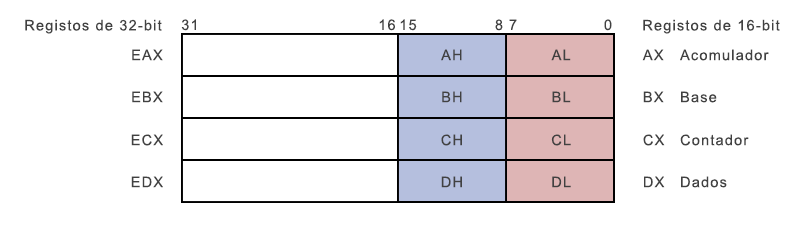
<style>
.page{position:relative;width:801px;height:226px;background:#ffffff}
.page>*{position:absolute;margin:0}
.t1{font:14.6px "ArialMT";letter-spacing:0.08em;color:#414141}
</style>
<div class="page">
<p class="t1" style="left:25px;top:19px;width:137px;height:15px">Registos de 32-bit</p>
<p class="t1" style="left:181px;top:19px;width:15px;height:12px">31</p>
<p class="t1" style="left:379px;top:19px;width:16px;height:12px">16</p>
<p class="t1" style="left:400px;top:19px;width:17px;height:12px">15</p>
<p class="t1" style="left:495px;top:19px;width:8px;height:12px">8</p>
<p class="t1" style="left:509px;top:19px;width:8px;height:11px">7</p>
<p class="t1" style="left:604px;top:19px;width:8px;height:12px">0</p>
<p class="t1" style="left:643px;top:19px;width:137px;height:15px">Registos de 16-bit</p>
<p class="t1" style="left:132px;top:49px;width:31px;height:12px">EAX</p>
<p class="t1" style="left:441px;top:49px;width:21px;height:12px">AH</p>
<p class="t1" style="left:551px;top:49px;width:20px;height:12px">AL</p>
<p class="t1" style="left:642px;top:49px;width:127px;height:12px">AX Acomulador</p>
<p class="t1" style="left:132px;top:91px;width:31px;height:12px">EBX</p>
<p class="t1" style="left:442px;top:91px;width:20px;height:12px">BH</p>
<p class="t1" style="left:552px;top:91px;width:19px;height:12px">BL</p>
<p class="t1" style="left:643px;top:91px;width:74px;height:12px">BX Base</p>
<p class="t1" style="left:131px;top:134px;width:32px;height:12px">ECX</p>
<p class="t1" style="left:441px;top:134px;width:21px;height:12px">CH</p>
<p class="t1" style="left:551px;top:134px;width:20px;height:12px">CL</p>
<p class="t1" style="left:643px;top:134px;width:106px;height:12px">CX Contador</p>
<p class="t1" style="left:131px;top:176px;width:32px;height:12px">EDX</p>
<p class="t1" style="left:441px;top:176px;width:21px;height:12px">DH</p>
<p class="t1" style="left:552px;top:176px;width:19px;height:12px">DL</p>
<p class="t1" style="left:644px;top:176px;width:83px;height:12px">DX Dados</p>
</div>
